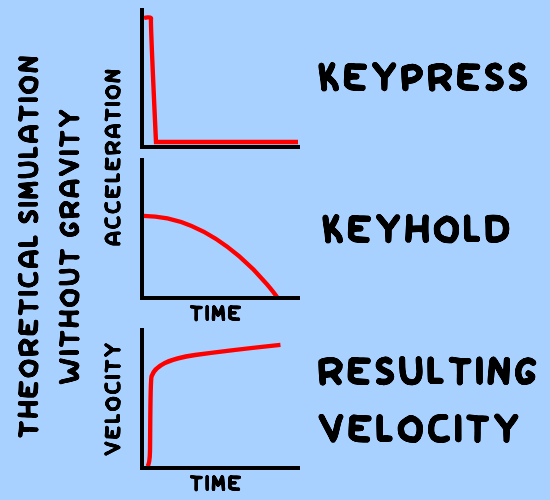
<style>
.page{position:relative;width:550px;height:500px;background:#a8d1ff}
.page>*{position:absolute;margin:0}
.t1{font:34.2px "Myfont-Regular";color:#a8d1ff}
.t2{font:34.2px "Myfont-Regular";color:#000000}
.t3{font:48px "Myfont-Regular";color:#000000}
.t4{font:27px "Myfont-Regular";color:#000000}
</style>
<div class="page">
<p class="t1" style="left:17px;top:56px;width:63px;height:382px;text-align:center;rotate:-90deg">Theoretical simulation<span class="t2"><br>without gravity</span></p>
<p class="t3" style="left:318px;top:62px;width:210px;height:30px">Keypress</p>
<p class="t4" style="left:104px;top:69px;width:17px;height:177px;rotate:-90deg">acceleration</p>
<p class="t3" style="left:322px;top:213px;width:188px;height:31px">KeyHold</p>
<p class="t4" style="left:189px;top:305px;width:52px;height:17px">Time</p>
<p class="t4" style="left:104px;top:343px;width:17px;height:113px;rotate:-90deg">VELOCITY</p>
<p class="t3" style="left:318px;top:356px;width:219px;height:87px">resulting<br>Velocity</p>
<p class="t4" style="left:189px;top:475px;width:52px;height:17px">Time</p>
</div>
